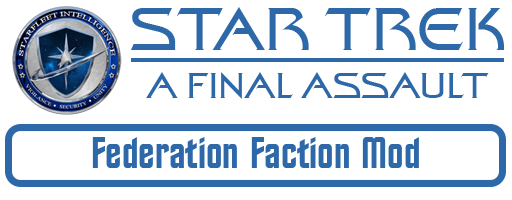
<style>
.page{position:relative;width:512px;height:200px;background:#ffffff}
.page>*{position:absolute;margin:0}
.t1{font:60px "StarTrekFilmBT-Regular";color:#2d68a9}
.t2{font:36px "StarTrekFilmBT-Regular";color:#2d68a9}
.t3{font:44px "StarTrekBT-Regular";color:#2d68a9}
</style>
<div class="page">
<p class="t1" style="left:131px;top:7px;width:373px;height:43px">STAR TREK</p>
<p class="t2" style="left:146px;top:72px;width:343px;height:27px">A FINAL ASSAULT</p>
<p class="t3" style="left:92px;top:137px;width:327px;height:31px">Federation Faction Mod</p>
</div>
